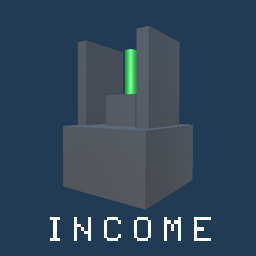
<style>
.page{position:relative;width:256px;height:256px;background:#223b54}
.page>*{position:absolute;margin:0}
.t1{font:34.7px "PixelTandysoft";letter-spacing:0.26em;color:#ffffff}
</style>
<div class="page">
<p class="t1" style="left:50px;top:217px;width:161px;height:24px">INCOME</p>
</div>
